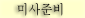
<style>
.page{position:relative;width:85px;height:18px}
.page>*{position:absolute;margin:0}
.t1{font:13.2px "BatangChe";scale:0.91 1}
</style>
<div class="page">
<p class="t1" style="left:17px;top:3px;width:46px;height:13px">미사준비</p>
</div>
